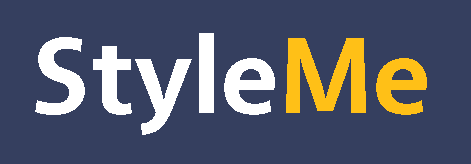
<style>
.page{position:relative;width:471px;height:164px;background:#353f5f}
.page>*{position:absolute;margin:0}
.t1{font:110.7px "Vegur-Bold";color:#ffffff}
.t2{font:110.7px "Vegur-Bold";color:#ffc017}
</style>
<div class="page">
<p class="t1" style="left:35px;top:33px;width:392px;height:102px">Style<span class="t2">Me</span></p>
</div>
